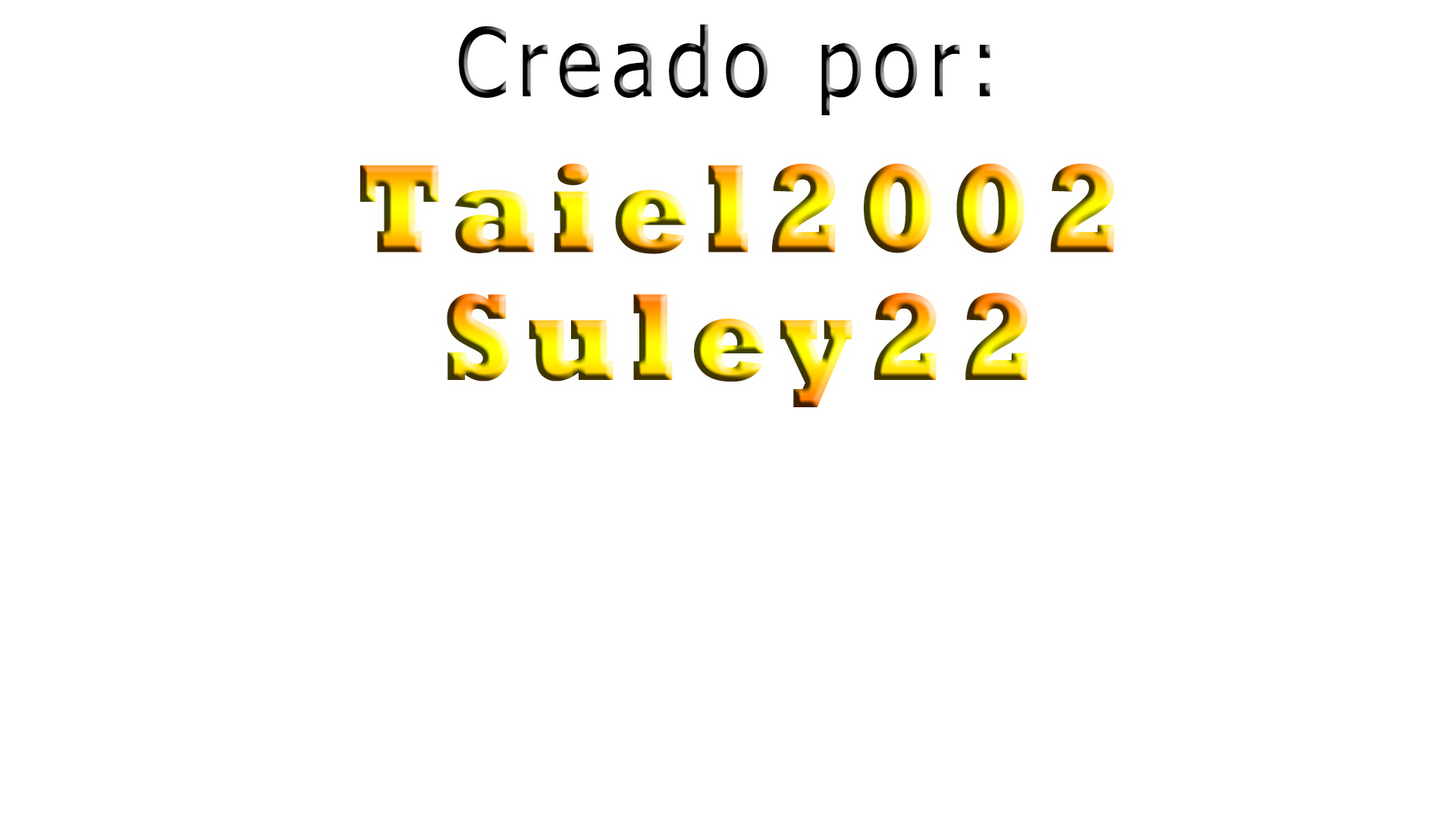
<style>
.page{position:relative;width:1456px;height:819px;background:#ffffff}
.page>*{position:absolute;margin:0}
.t1{font:94.2px "Tahoma";letter-spacing:0.115em;color:#000000;scale:0.91 1}
.t2{font:127.7px "Rockwell-ExtraBold";letter-spacing:0.115em;scale:0.91 1}
.t3{font:125.6px "Rockwell-ExtraBold";letter-spacing:0.115em;scale:0.91 1}
</style>
<div class="page">
<p class="t1" style="left:459px;top:24px;width:531px;height:91px">Creado por:</p>
<p class="t2" style="left:360px;top:163px;width:755px;height:91px">Taiel2002</p>
<p class="t3" style="left:447px;top:293px;width:581px;height:114px">Suley22</p>
</div>
